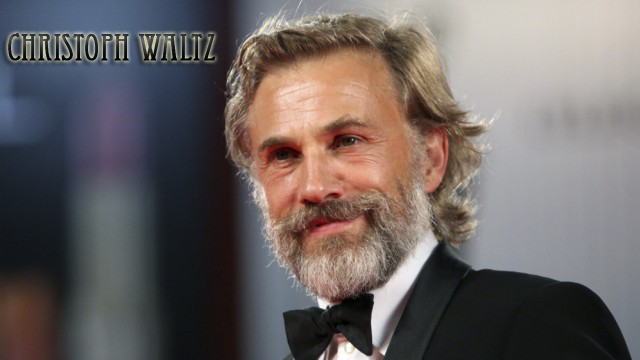
<style>
.page{position:relative;width:640px;height:360px}
.page>*{position:absolute;margin:0}
.t1{font:36px "EccentricStd";font-weight:bold}
</style>
<div class="page">
<p class="t1" style="left:8px;top:33px;width:208px;height:28px">Christoph Waltz</p>
</div>
